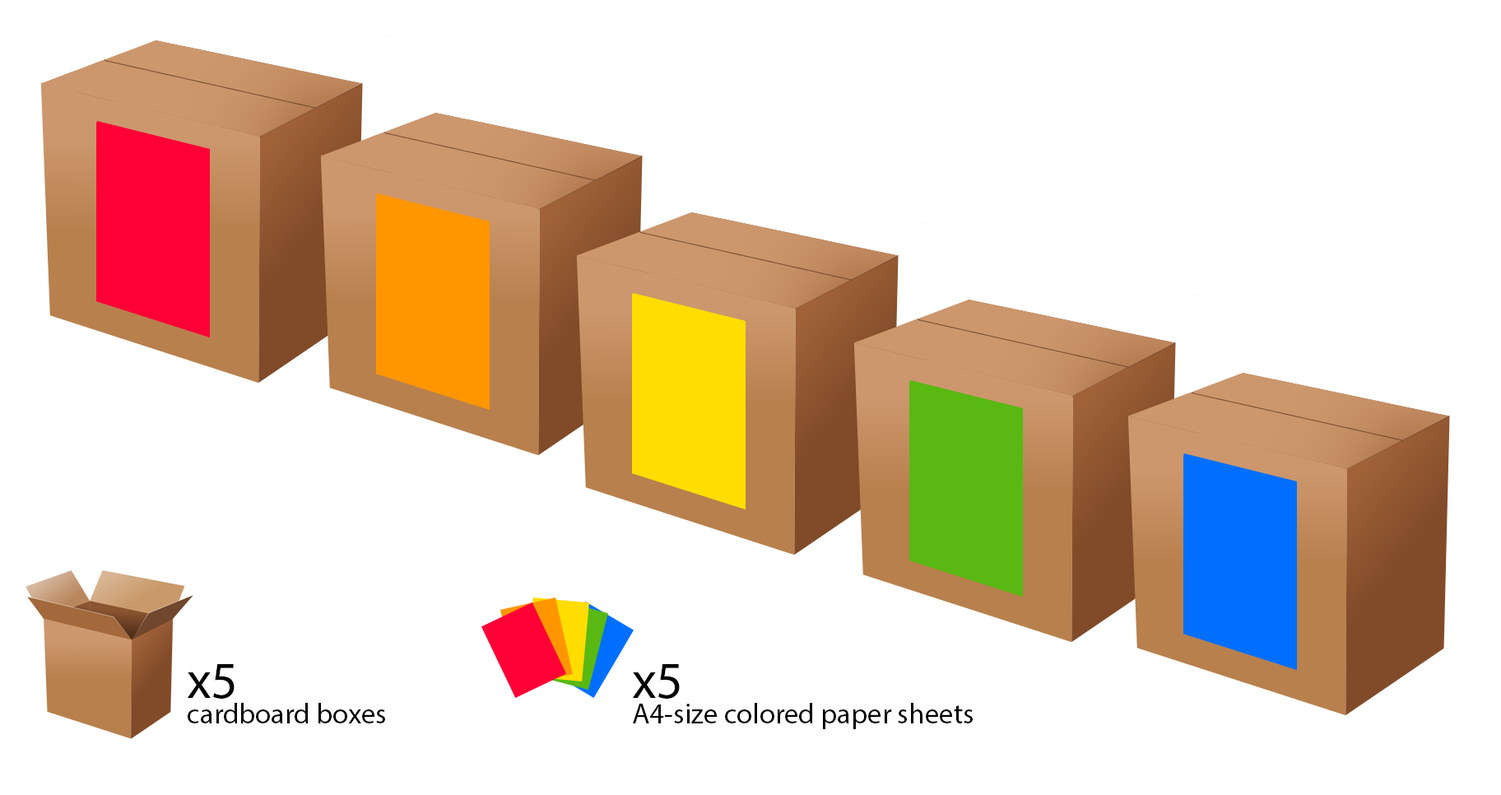
<style>
.page{position:relative;width:1501px;height:795px;background:#ffffff}
.page>*{position:absolute;margin:0}
.t1{font:43.9px "MyriadPro-Regular";color:#000000}
.t2{font:24.2px "MyriadPro-Regular";color:#000000}
</style>
<div class="page">
<p class="t1" style="left:187px;top:664px;width:47px;height:34px">x5</p>
<p class="t1" style="left:632px;top:664px;width:48px;height:34px">x5</p>
<p class="t2" style="left:188px;top:703px;width:197px;height:20px">cardboard boxes</p>
<p class="t2" style="left:633px;top:703px;width:339px;height:26px">Α4-size colored paper sheets</p>
</div>
